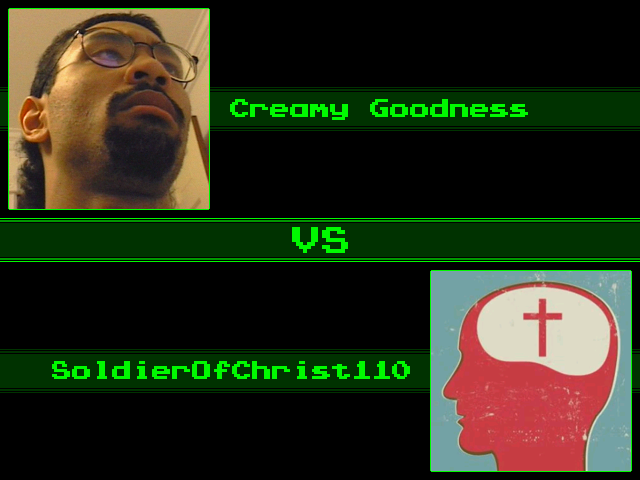
<style>
.page{position:relative;width:640px;height:480px;background:#000000}
.page>*{position:absolute;margin:0}
.t1{font:20px "PressStartK";color:#00fa00}
.t2{font:30px "PressStartK";color:#00fa00}
</style>
<div class="page">
<p class="t1" style="left:230px;top:99px;width:298px;height:21px">Creamy Goodness</p>
<p class="t2" style="left:292px;top:227px;width:56px;height:26px">VS</p>
<p class="t1" style="left:52px;top:361px;width:358px;height:18px">SoldierOfChrist110</p>
</div>
